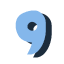
<style>
.page{position:relative;width:64px;height:64px;background:#ffffff}
.page>*{position:absolute;margin:0}
.t1{font:66px "Samba";color:#84b7eb}
.t2{font:66px "Samba"}
</style>
<div class="page">
<p class="t1" style="left:15px;top:10px;width:31px;height:45px">9</p>
<p class="t2" style="left:21px;top:13px;width:31px;height:45px">9</p>
</div>
